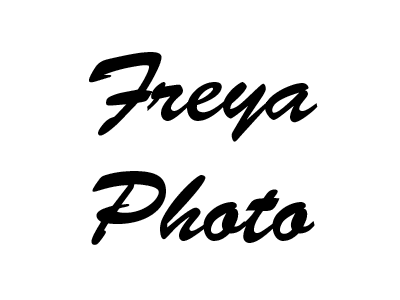
<style>
.page{position:relative;width:400px;height:300px;background:#ffffff}
.page>*{position:absolute;margin:0}
.t1{font:100px "BrushScriptStd";color:#000000}
</style>
<div class="page">
<p class="t1" style="left:89px;top:52px;width:229px;height:193px;text-align:center">Freya<br>Photo</p>
</div>
